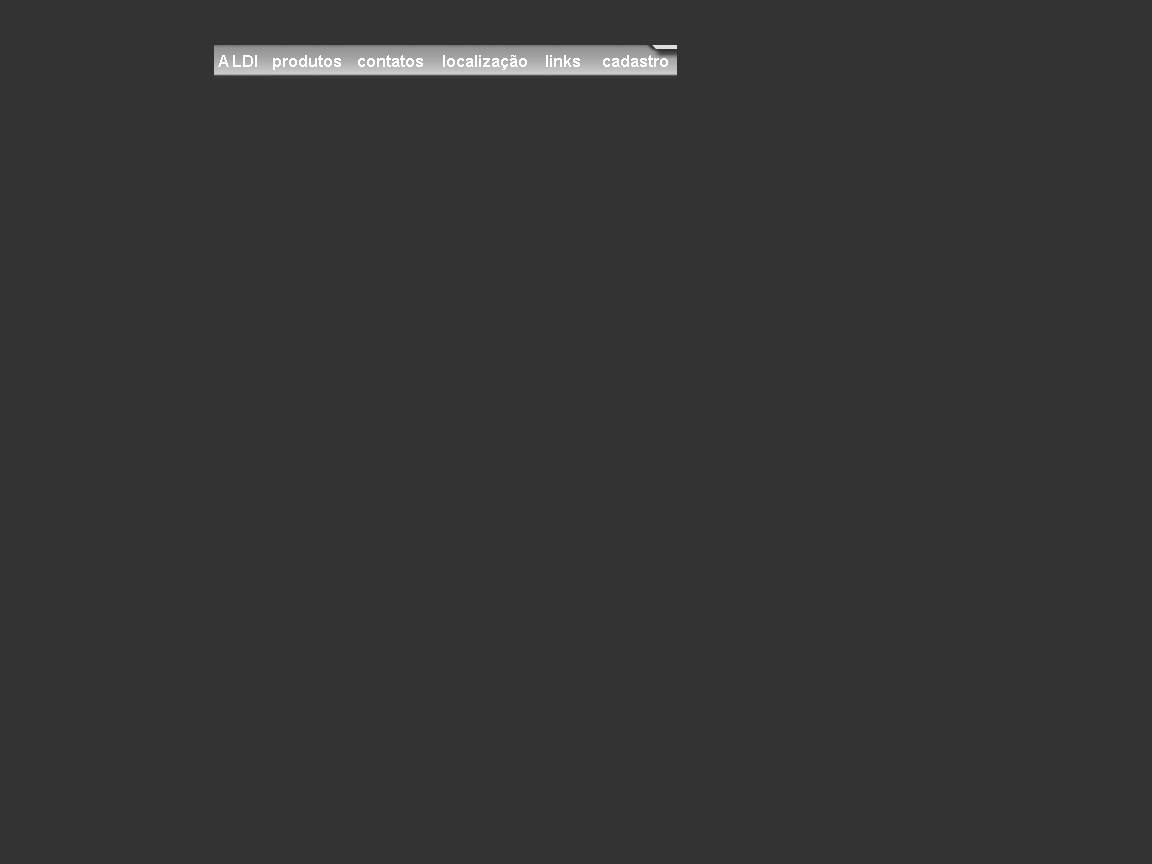
<style>
.page{position:relative;width:1152px;height:864px;background:#333333}
.page>*{position:absolute;margin:0}
.t1{font:15.9px "Arial-BoldMT";color:#ffffff}
</style>
<div class="page">
<p class="t1" style="left:218px;top:55px;width:39px;height:12px">A LDI</p>
<p class="t1" style="left:273px;top:55px;width:68px;height:15px">produtos</p>
<p class="t1" style="left:358px;top:55px;width:65px;height:12px">contatos</p>
<p class="t1" style="left:443px;top:55px;width:84px;height:15px">localização</p>
<p class="t1" style="left:546px;top:55px;width:34px;height:12px">links</p>
<p class="t1" style="left:603px;top:55px;width:65px;height:12px">cadastro</p>
</div>
